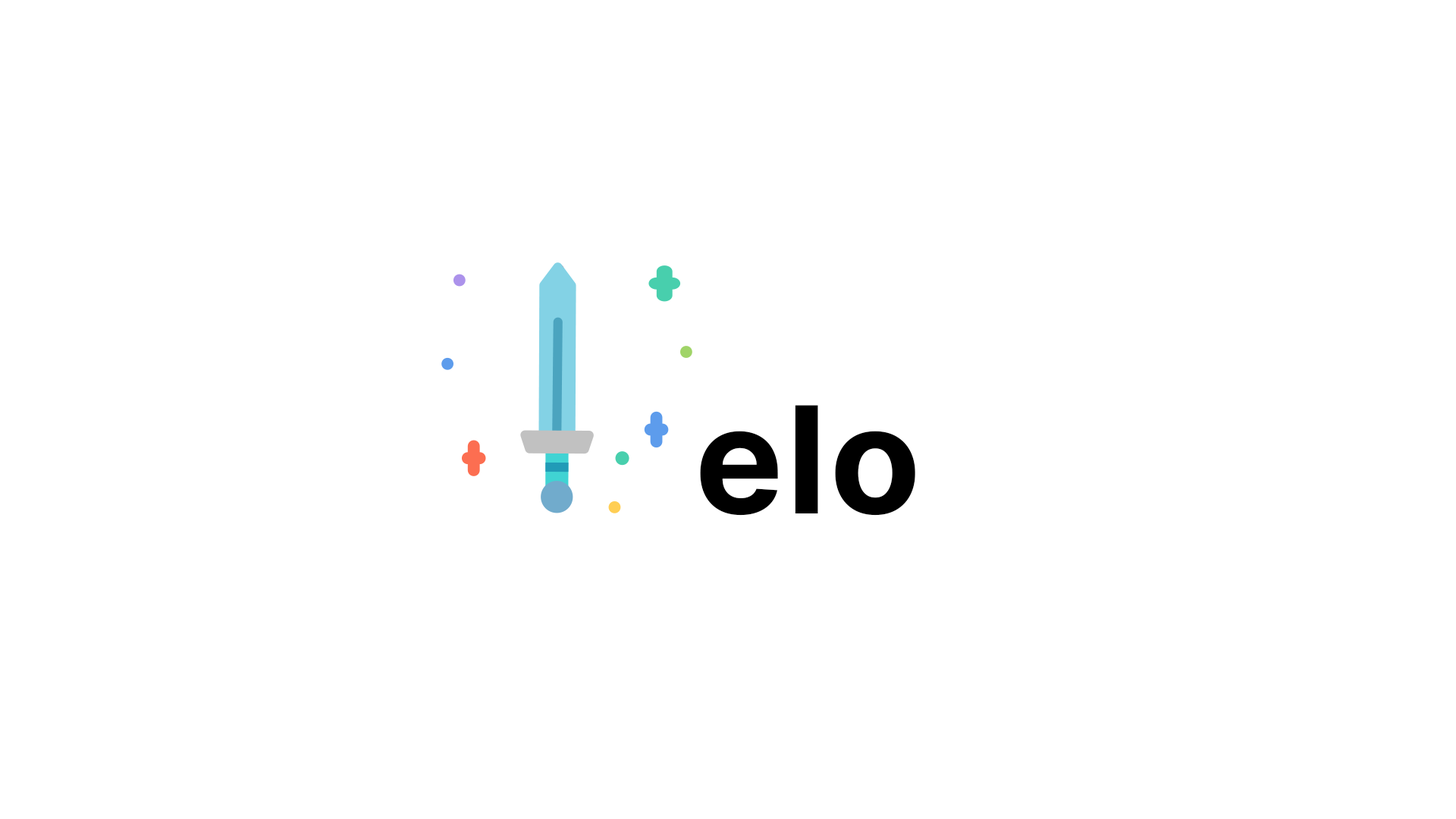
<style>
.page{position:relative;width:1456px;height:819px;background:#ffffff}
.page>*{position:absolute;margin:0}
.t1{font:148.5px "Inter-Bold";letter-spacing:0.02em;color:#000000}
</style>
<div class="page">
<p class="t1" style="left:700px;top:405px;width:215px;height:111px">elo</p>
</div>
